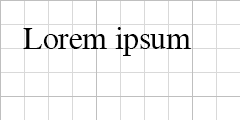
<style>
.page{position:relative;width:240px;height:120px;background:#ffffff}
.page>*{position:absolute;margin:0}
.t1{font:32px "Times-Roman";color:#000000}
</style>
<div class="page">
<p class="t1" style="left:23px;top:27px;width:168px;height:29px">Lorem ipsum</p>
</div>
